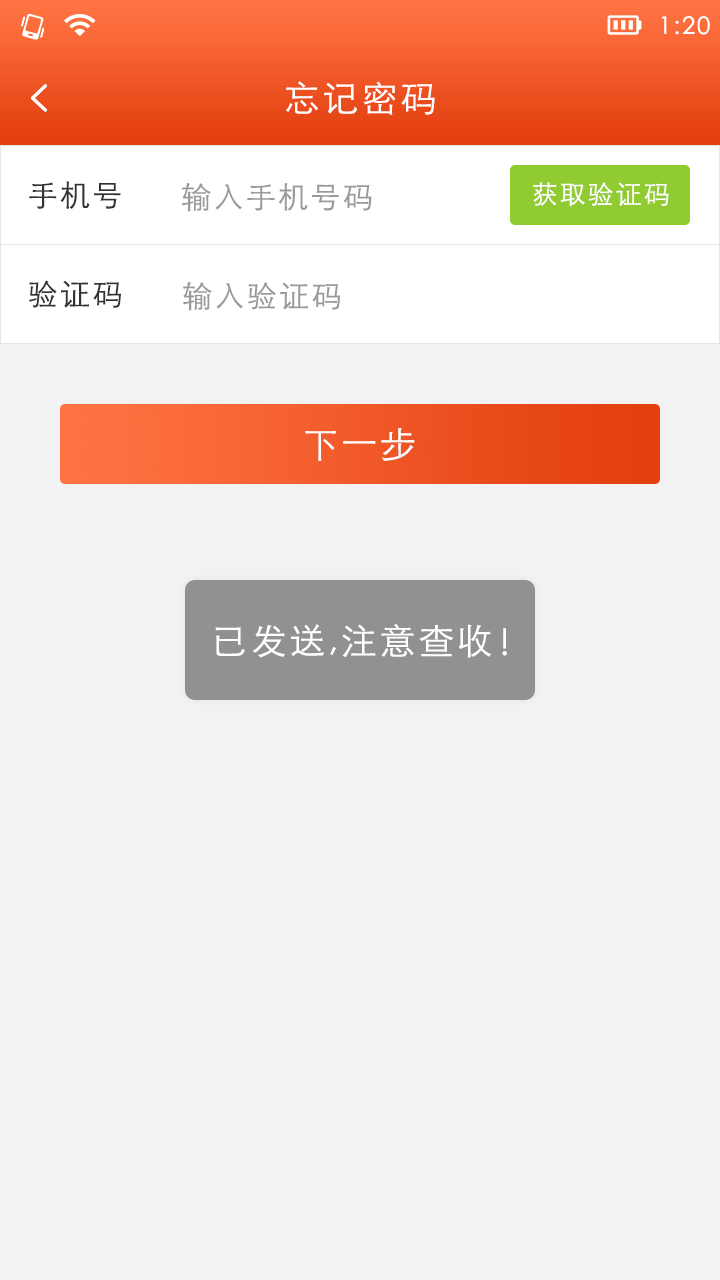
<style>
.page{position:relative;width:720px;height:1280px;background:#f2f2f2}
.page>*{position:absolute;margin:0}
.t1{font:24px "STXihei";letter-spacing:0.075em;color:#ffffff}
.t2{font:36px "STHeitiSC-Light";letter-spacing:0.075em;color:#ffffff}
.t3{font:30px "STHeitiSC-Light";letter-spacing:0.075em;color:#333333}
.t4{font:30px "STHeitiSC-Light";letter-spacing:0.075em;color:#999999}
.t5{font:26px "STHeitiSC-Light";letter-spacing:0.075em;color:#ffffff}
.t6{font:30px "STHeitiSC-Light";letter-spacing:0.075em;color:#999999;text-transform:uppercase}
</style>
<div class="page">
<p class="t1" style="left:661px;top:16px;width:49px;height:19px">1:20</p>
<p class="t2" style="left:286px;top:81px;width:149px;height:34px">忘记密码</p>
<p class="t3" style="left:29px;top:181px;width:92px;height:28px">手机号</p>
<p class="t4" style="left:182px;top:183px;width:190px;height:29px">输入手机号码</p>
<p class="t5" style="left:533px;top:182px;width:136px;height:24px">获取验证码</p>
<p class="t3" style="left:29px;top:280px;width:92px;height:28px">验证码</p>
<p class="t6" style="left:183px;top:282px;width:158px;height:29px">输入验证码</p>
<p class="t2" style="left:305px;top:428px;width:110px;height:33px">下一步</p>
<p class="t2" style="left:215px;top:624px;width:277px;height:34px">已发送,注意查收</p>
<p class="t2" style="left:502px;top:628px;width:5px;height:28px">!</p>
</div>
